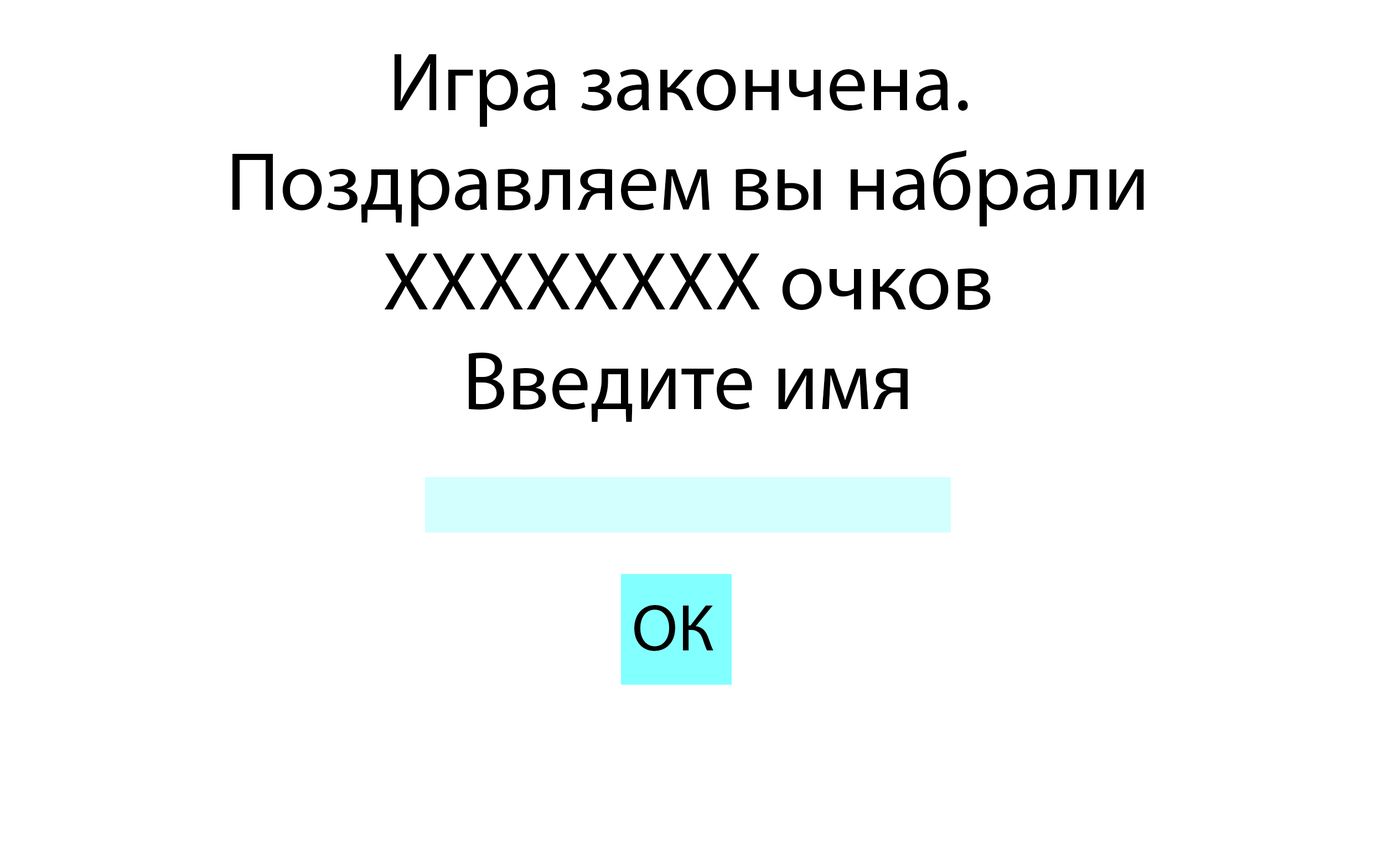
<style>
.page{position:relative;width:1398px;height:853px;background:#ffffff}
.page>*{position:absolute;margin:0}
.t1{font:83px "MyriadPro-Regular";color:#000000}
.t2{font:66.4px "MyriadPro-Regular";color:#000000}
</style>
<div class="page">
<p class="t1" style="left:232px;top:54px;width:912px;height:368px;text-align:center">Игра закончена. <br>Поздравляем вы набрали<br>ХХХХХХХХ очков<br>Введите имя</p>
<p class="t2" style="left:634px;top:605px;width:79px;height:46px">ОК</p>
</div>
